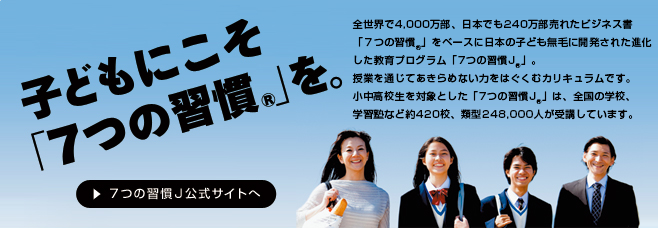
<style>
.page{position:relative;width:658px;height:228px}
.page>*{position:absolute;margin:0}
.t1{font:10px/18px "ShinGoPro-Medium";letter-spacing:0.05em;color:#010101}
</style>
<div class="page">
<p class="t1" style="left:352px;top:19px;width:300px;height:101px">全世界で4,000万部、日本でも240万部売れたビジネス書<br>「７つの習慣®」をベースに日本の子ども無毛に開発された進化<br>した教育プログラム「7つの習慣J®」。<br>授業を通じてあきらめない力をはぐくむカリキュラムです。<br>小中高校生を対象とした「7つの習慣J®」は、全国の学校、<br>学習塾など約420校、類型248,000人が受講しています。</p>
</div>
